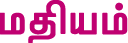
<style>
.page{position:relative;width:128px;height:43px;background:#ffffff}
.page>*{position:absolute;margin:0}
.t1{font:41.7px "Sun-TommyTamilNormal";letter-spacing:0.05em;color:#c00171;font-weight:bold}
</style>
<div class="page">
<p class="t1" style="left:0px;top:0px;width:128px;height:44px">kjpak;</p>
</div>
